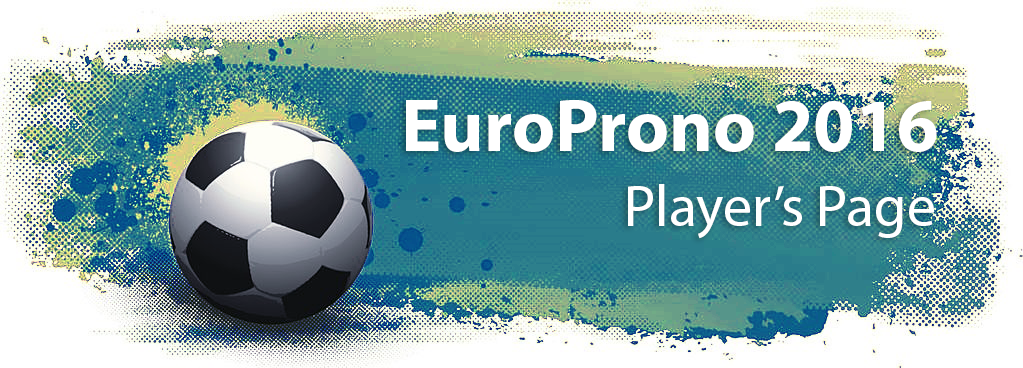
<style>
.page{position:relative;width:1023px;height:368px}
.page>*{position:absolute;margin:0}
.t1{font:75px "MyriadPro-Bold";color:#ffffff}
.t2{font:58.3px "MyriadPro-Regular";color:#ffffff}
</style>
<div class="page">
<p class="t1" style="left:406px;top:100px;width:531px;height:52px">EuroProno 2016</p>
<p class="t2" style="left:628px;top:184px;width:306px;height:55px">Player’s Page</p>
</div>
